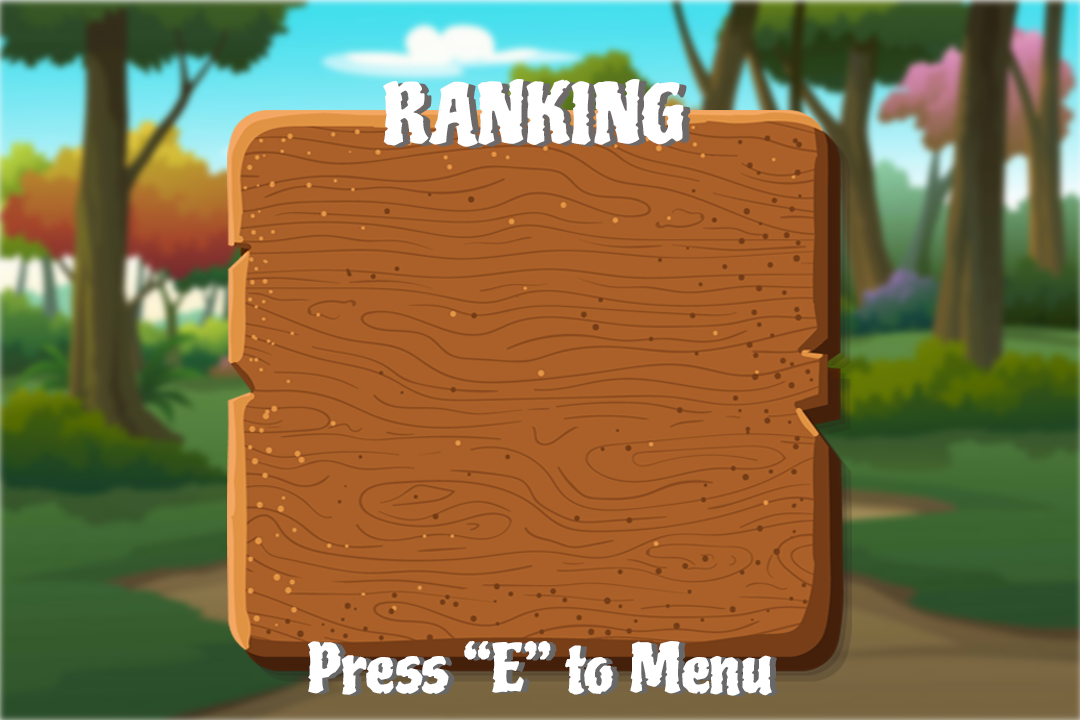
<style>
.page{position:relative;width:1080px;height:720px;background:#aa6028}
.page>*{position:absolute;margin:0}
.t1{font:80px "Piedra-Regular";color:#ffffff}
.t2{font:65px "Piedra-Regular";color:#ffffff}
.t3{font:65px "Piedra-Regular"}
</style>
<div class="page">
<p class="t1" style="left:383px;top:79px;width:301px;height:68px">RANKING</p>
<p class="t2" style="left:308px;top:641px;width:464px;height:55px">Press “E” to Menu</p>
<p class="t3" style="left:314px;top:642px;width:464px;height:55px">Press “E” to Menu</p>
</div>
